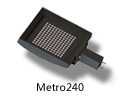
<style>
.page{position:relative;width:120px;height:100px;background:#ffffff}
.page>*{position:absolute;margin:0}
.t1{font:10px "MicrosoftYaHei";letter-spacing:0.015em;color:#000000}
</style>
<div class="page">
<p class="t1" style="left:37px;top:83px;width:47px;height:8px">Metro240</p>
</div>
